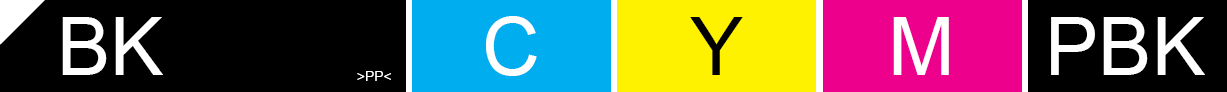
<style>
.page{position:relative;width:1227px;height:92px;background:#000000}
.page>*{position:absolute;margin:0}
.t1{font:80px "ArialMT";color:#ffffff}
.t2{font:80px "ArialMT";color:#000000}
.t3{font:14px "ArialMT";color:#ffffff}
</style>
<div class="page">
<p class="t1" style="left:62px;top:17px;width:101px;height:58px">BK</p>
<p class="t1" style="left:486px;top:16px;width:51px;height:60px">C</p>
<p class="t2" style="left:690px;top:17px;width:53px;height:58px">Y</p>
<p class="t1" style="left:893px;top:17px;width:56px;height:58px">M</p>
<p class="t1" style="left:1051px;top:17px;width:154px;height:58px">PBK</p>
<p class="t3" style="left:357px;top:71px;width:34px;height:10px">&gt;PP&lt;</p>
</div>
